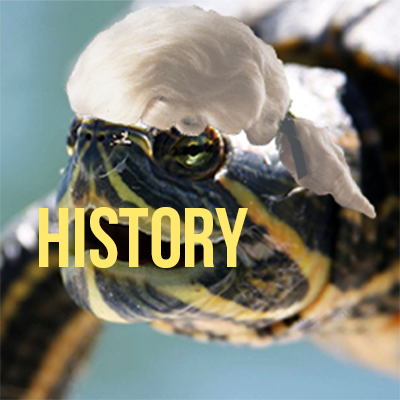
<style>
.page{position:relative;width:400px;height:400px}
.page>*{position:absolute;margin:0}
.t1{font:84px "BebasNeue";color:#fee96c}
</style>
<div class="page">
<p class="t1" style="left:39px;top:207px;width:209px;height:61px">history</p>
</div>
